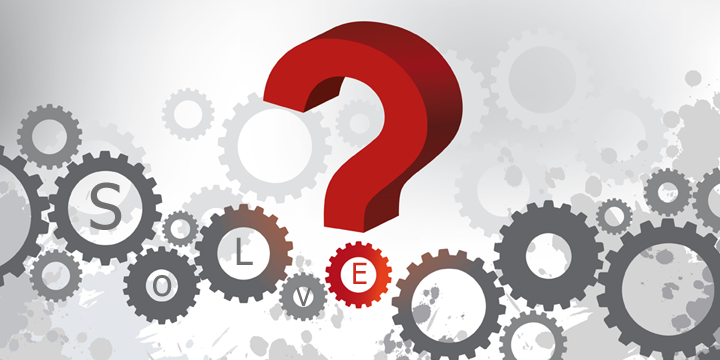
<style>
.page{position:relative;width:720px;height:360px}
.page>*{position:absolute;margin:0}
.t1{font:62.5px "Tahoma";color:#707070}
.t2{font:37.5px "Tahoma";color:#707070}
.t3{font:29.2px "Tahoma";color:#ce2b20}
.t4{font:25px "Tahoma";color:#707070}
</style>
<div class="page">
<p class="t1" style="left:90px;top:182px;width:32px;height:48px">S</p>
<p class="t2" style="left:236px;top:237px;width:17px;height:28px">L</p>
<p class="t3" style="left:353px;top:262px;width:14px;height:22px">E</p>
<p class="t2" style="left:153px;top:275px;width:19px;height:22px">o</p>
<p class="t4" style="left:296px;top:287px;width:15px;height:19px">V</p>
</div>
